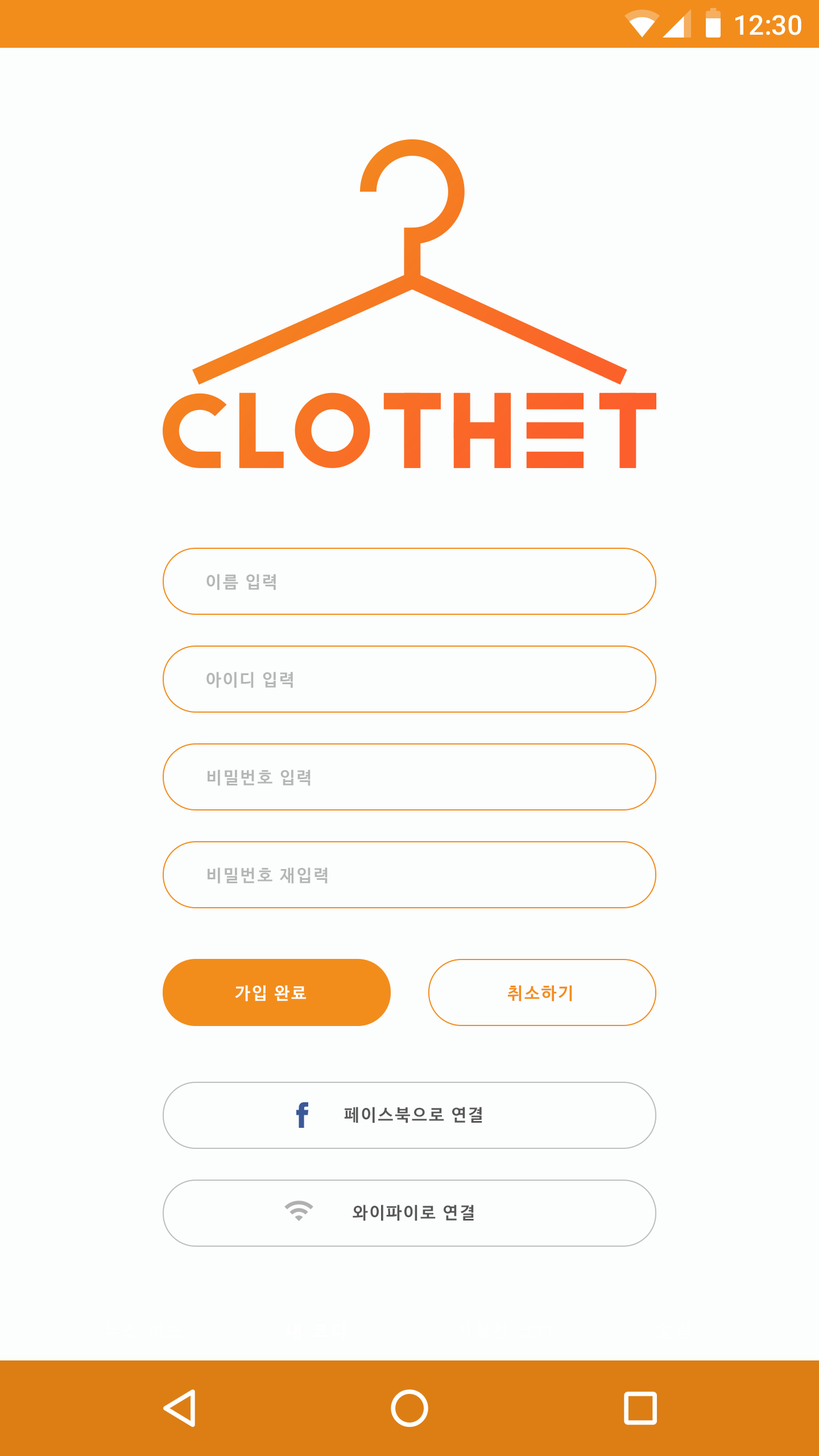
<style>
.page{position:relative;width:819px;height:1456px;background:#fcfdfd}
.page>*{position:absolute;margin:0}
.t1{font:27.3px "Roboto-Medium";color:#ffffff}
.t2{font:17.1px "NanumBarunGothicBold";letter-spacing:0.1em;color:#b5b6b6}
.t3{font:17.1px "NanumBarunGothicBold";letter-spacing:0.1em;color:#fcfdfd}
.t4{font:17.1px "NanumBarunGothicBold";letter-spacing:0.1em;color:#f28d1c}
.t5{font:17.1px "NanumBarunGothicBold";letter-spacing:0.1em;color:#575757}
</style>
<div class="page">
<p class="t1" style="left:735px;top:15px;width:66px;height:20px">12:30</p>
<p class="t2" style="left:206px;top:574px;width:70px;height:16px">이름 입력</p>
<p class="t2" style="left:206px;top:672px;width:87px;height:16px">아이디 입력</p>
<p class="t2" style="left:208px;top:770px;width:103px;height:16px">비밀번호 입력</p>
<p class="t2" style="left:208px;top:867px;width:120px;height:17px">비밀번호 재입력</p>
<p class="t3" style="left:235px;top:985px;width:71px;height:17px">가입 완료</p>
<p class="t4" style="left:508px;top:985px;width:64px;height:17px">취소하기</p>
<p class="t5" style="left:344px;top:1107px;width:138px;height:16px">페이스북으로 연결</p>
<p class="t5" style="left:353px;top:1205px;width:121px;height:16px">와이파이로 연결</p>
</div>
